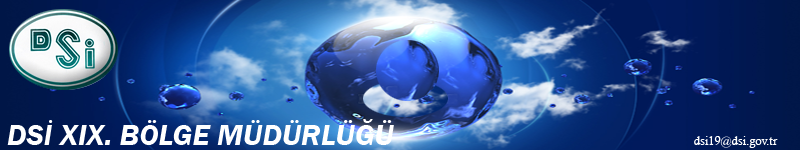
<style>
.page{position:relative;width:800px;height:150px}
.page>*{position:absolute;margin:0}
.t1{font:30px "FranklinGothic-DemiItalic";color:#ffffff}
.t2{font:12px "CalistoMT";color:#ffffff}
</style>
<div class="page">
<p class="t1" style="left:7px;top:119px;width:771px;height:29px">DSİ XIX. BÖLGE MÜDÜRLÜĞÜ                                             <span class="t2">dsi19@dsi.gov.tr</span></p>
</div>
